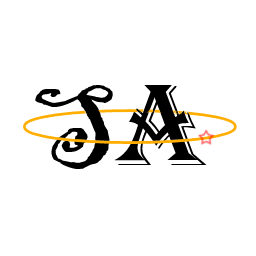
<style>
.page{position:relative;width:256px;height:256px;background:#ffffff}
.page>*{position:absolute;margin:0}
.t1{font:120px "BlackadderITC-Regular";color:#000000}
.t2{font:120px "Algerian";color:#000000}
</style>
<div class="page">
<p class="t1" style="left:35px;top:85px;width:172px;height:84px">S<span class="t2">A</span></p>
</div>
